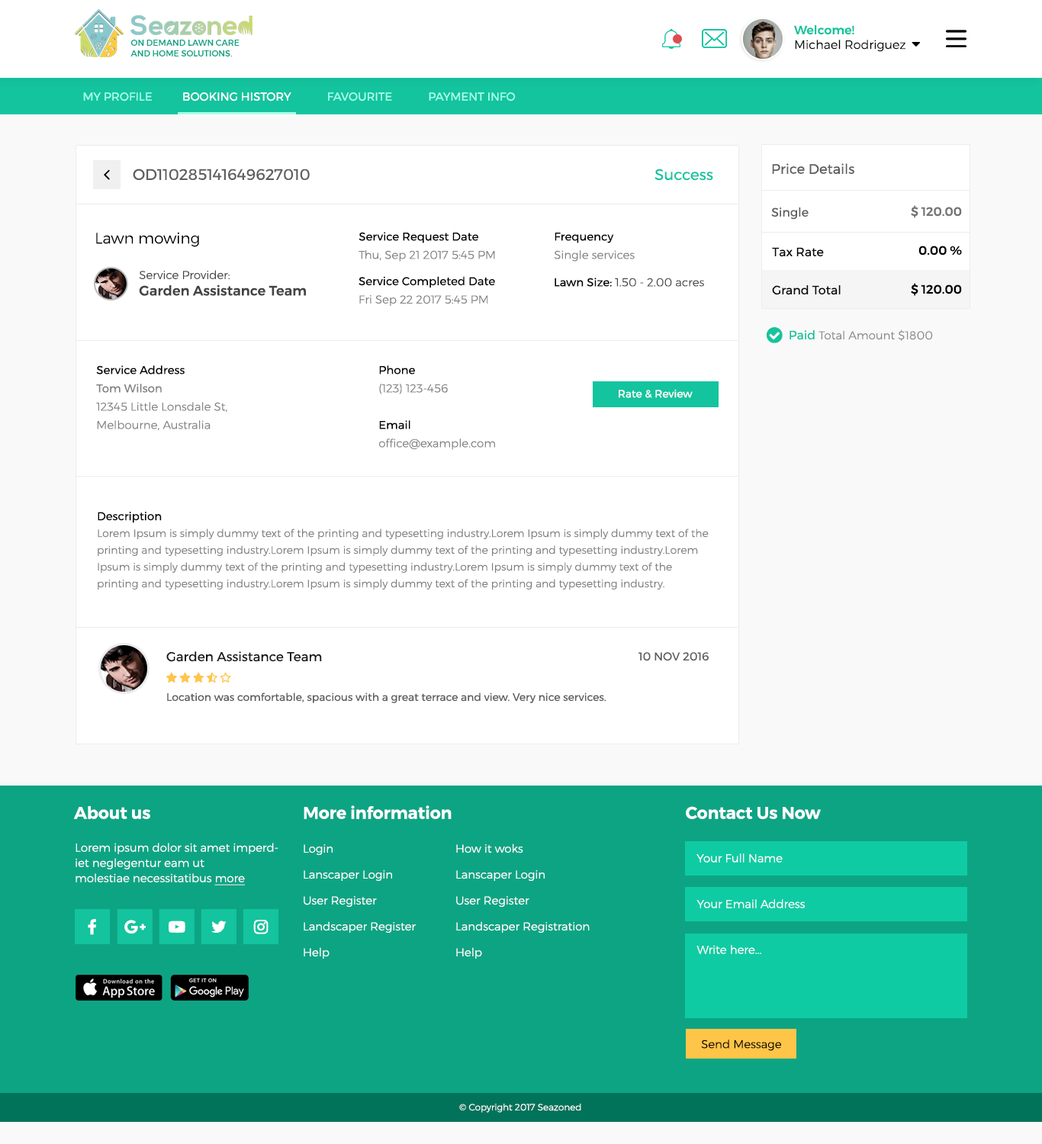
<style>
.page{position:relative;width:1042px;height:1144px;background:#ffffff}
.page>*{position:absolute;margin:0}
.t1{font:12.2px "Montserrat-Light";color:#000000}
.t2{font:12.2px "Montserrat-Medium";color:#13c49e}
.t3{font:8.4px "Montserrat-Medium";color:#0da484;text-transform:uppercase}
.t4{font:11.4px "Montserrat-Regular";color:#a6feeb;text-transform:uppercase}
.t5{font:11.4px "Montserrat-Regular";color:#ffffff;text-transform:uppercase}
.t6{font:15.3px "Montserrat-Regular";color:#5e5e5e}
.t7{font:15.3px "Montserrat-Regular";color:#14c49e}
.t8{font:13.7px "Montserrat-Regular";color:#5e5e5e}
.t9{font:12.2px "Montserrat-Regular";color:#5e5e5e}
.t10{font:12.2px "Montserrat-Medium";color:#747474}
.t11{font:15.3px "Montserrat-Light";color:#000000}
.t12{font:11.4px/18.3px "Montserrat-Light";color:#838383}
.t13{font:11.4px/18.3px "Montserrat-Regular";color:#000000}
.t14{font:12.2px "Montserrat-Medium";color:#000000}
.t15{font:12.2px "Montserrat-Regular";color:#060606}
.t16{font:13.7px "Montserrat-Medium";color:#434343}
.t17{font:11.4px "Montserrat-Light";color:#434343}
.t18{font:11.4px "Montserrat-Light";color:#474747}
.t19{font:11.4px "Montserrat-Regular";color:#000000}
.t20{font:2.5px "Montserrat-Light";color:#ffffff}
.t21{font:11.4px "Montserrat-Light";color:#898989}
.t22{font:12.2px "Montserrat-Regular";color:#14c49e}
.t23{font:11.4px/18.3px "Montserrat-Regular";color:#828282}
.t24{font:10.7px "Montserrat-Regular";color:#ffffff}
.t25{font:10.7px/16.8px "Montserrat-Light";color:#808080}
.t26{font:11.4px/20.6px "Montserrat-Regular";color:#000000}
.t27{font:13px "Montserrat-Regular";color:#171717}
.t28{font:11.4px "Montserrat-Regular";color:#5e5e5e}
.t29{font:10.7px "Montserrat-Regular";color:#5e5e5e}
.t30{font:16.8px "Montserrat-SemiBold";color:#ffffff}
.t31{font:11.4px/15.3px "Montserrat-Light";color:#ffffff}
.t32{font:11.4px/15.3px "Montserrat-Light";color:#ffffff;text-decoration:underline}
.t33{font:11.4px/25.9px "Montserrat-Light";color:#ffffff}
.t34{font:11.4px "Montserrat-Light";color:#ffffff}
.t35{font:11.4px "Montserrat-Light";color:#000000}
.t36{font:9.2px "Montserrat-Light";color:#ffffff}
</style>
<div class="page">
<p class="t1" style="left:794px;top:25px;width:112px;height:27px"><span class="t2">Welcome! <br></span>Michael Rodriguez</p>
<p class="t3" style="left:130px;top:40px;width:110px;height:16px">on demand lawn care <br>and home solutions.</p>
<p class="t4" style="left:83px;top:92px;width:433px;height:9px">my profile          <span class="t5">booking history   </span>         favourite            payment info</p>
<p class="t6" style="left:133px;top:169px;width:177px;height:12px">OD110285141649627010</p>
<p class="t7" style="left:655px;top:169px;width:58px;height:12px">Success</p>
<p class="t8" style="left:772px;top:163px;width:82px;height:11px">Price Details</p>
<p class="t9" style="left:771px;top:207px;width:38px;height:13px">Single</p>
<p class="t10" style="left:911px;top:205px;width:51px;height:13px">$ 120.00</p>
<p class="t11" style="left:96px;top:232px;width:103px;height:15px">Lawn mowing</p>
<p class="t12" style="left:359px;top:232px;width:136px;height:30px"><span class="t13">Service Request Date<br></span>Thu, Sep 21 2017 5:45 PM</p>
<p class="t12" style="left:554px;top:233px;width:81px;height:29px"><span class="t13">Frequency<br></span>Single services</p>
<p class="t14" style="left:918px;top:246px;width:44px;height:10px">0.00 %</p>
<p class="t15" style="left:772px;top:247px;width:52px;height:10px">Tax Rate</p>
<p class="t16" style="left:139px;top:270px;width:167px;height:26px"><span class="t17">Service Provider:<br></span>Garden Assistance Team</p>
<p class="t12" style="left:359px;top:276px;width:136px;height:30px"><span class="t13">Service Completed Date<br></span>Fri Sep 22 2017 5:45 PM</p>
<p class="t18" style="left:555px;top:278px;width:149px;height:9px"><span class="t19">Lawn Size: </span>1.50 - 2.00 acres</p>
<p class="t20" style="left:95px;top:282px;width:10px;height:3px">Change</p>
<p class="t15" style="left:772px;top:285px;width:69px;height:10px">Grand Total</p>
<p class="t14" style="left:911px;top:283px;width:51px;height:13px">$ 120.00</p>
<p class="t21" style="left:790px;top:330px;width:143px;height:11px"><span class="t22">Paid </span>Total Amount $1800</p>
<p class="t12" style="left:96px;top:365px;width:131px;height:66px"><span class="t13">Service Address<br></span><span class="t23">Tom Wilson <br></span>12345 Little Lonsdale St, <br>Melbourne, Australia</p>
<p class="t12" style="left:378px;top:365px;width:117px;height:85px"><span class="t13">Phone<br></span>(123) 123-456<br><br><span class="t13">Email<br></span>office@example.com</p>
<p class="t24" style="left:619px;top:389px;width:74px;height:9px">Rate &amp; Review</p>
<p class="t25" style="left:98px;top:512px;width:611px;height:78px"><span class="t26">Description <br></span>Lorem Ipsum is simply dummy text of the printing and typesetting industry.Lorem Ipsum is simply dummy text of the printing and typesetting industry.Lorem Ipsum is simply dummy text of the printing and typesetting industry.Lorem Ipsum is simply dummy text of the printing and typesetting industry.Lorem Ipsum is simply dummy text of the printing and typesetting industry.Lorem Ipsum is simply dummy text of the printing and typesetting industry.</p>
<p class="t27" style="left:166px;top:651px;width:156px;height:11px">Garden Assistance Team</p>
<p class="t28" style="left:639px;top:652px;width:70px;height:9px">10 NOV 2016</p>
<p class="t29" style="left:167px;top:693px;width:439px;height:10px">Location was comfortable, spacious with a great terrace and view. Very nice services.</p>
<p class="t30" style="left:74px;top:806px;width:76px;height:13px">About us</p>
<p class="t30" style="left:304px;top:806px;width:148px;height:13px">More information</p>
<p class="t30" style="left:686px;top:806px;width:135px;height:13px">Contact Us Now</p>
<p class="t31" style="left:76px;top:843px;width:202px;height:43px">Lorem ipsum dolor sit amet imperdiet neglegentur eam ut<br>molestiae necessitatibus <span class="t32">more</span></p>
<p class="t33" style="left:304px;top:844px;width:112px;height:115px">Login<br>Lanscaper Login<br>User Register<br>Landscaper Register<br>Help</p>
<p class="t33" style="left:456px;top:844px;width:134px;height:115px">How it woks<br>Lanscaper Login<br>User Register<br>Landscaper Registration<br>Help</p>
<p class="t34" style="left:696px;top:854px;width:87px;height:9px">Your Full Name</p>
<p class="t34" style="left:696px;top:899px;width:109px;height:10px">Your Email Address</p>
<p class="t34" style="left:696px;top:945px;width:65px;height:9px">Write here...</p>
<p class="t35" style="left:701px;top:1040px;width:80px;height:11px">Send Message</p>
<p class="t36" style="left:459px;top:1104px;width:122px;height:9px">© Copyright 2017 Seazoned</p>
</div>
